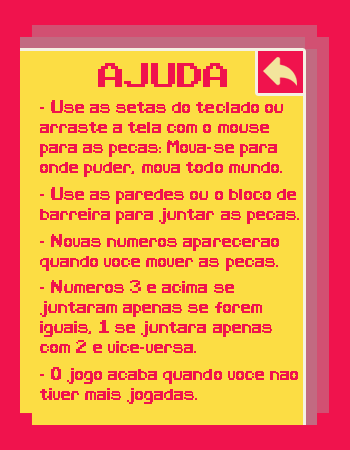
<style>
.page{position:relative;width:350px;height:450px;background:#fcdd44}
.page>*{position:absolute;margin:0}
.t1{font:48px "ArcadeClassic";color:#f0134d}
.t2{font:18px/20px "ArcadeAlternate";color:#f0134d}
</style>
<div class="page">
<p class="t1" style="left:98px;top:63px;width:129px;height:24px">AJUDA</p>
<p class="t2" style="left:40px;top:100px;width:259px;height:304px">- Use as setas do teclado ou arraste a tela com o mouse para as pecas: Mova-se para onde puder, mova todo mundo.<br><br><br><br>- Use as paredes ou o bloco de barreira para juntar as pecas.<br><br><br><br>- Novas numeros aparecerao quando voce mover as pecas.<br><br><br><br>- Numeros 3 e acima se juntaram apenas se forem iguais, 1 se juntara apenas com 2 e vice-versa.<br><br><br><br>- O jogo acaba quando voce nao tiver mais jogadas.</p>
</div>
